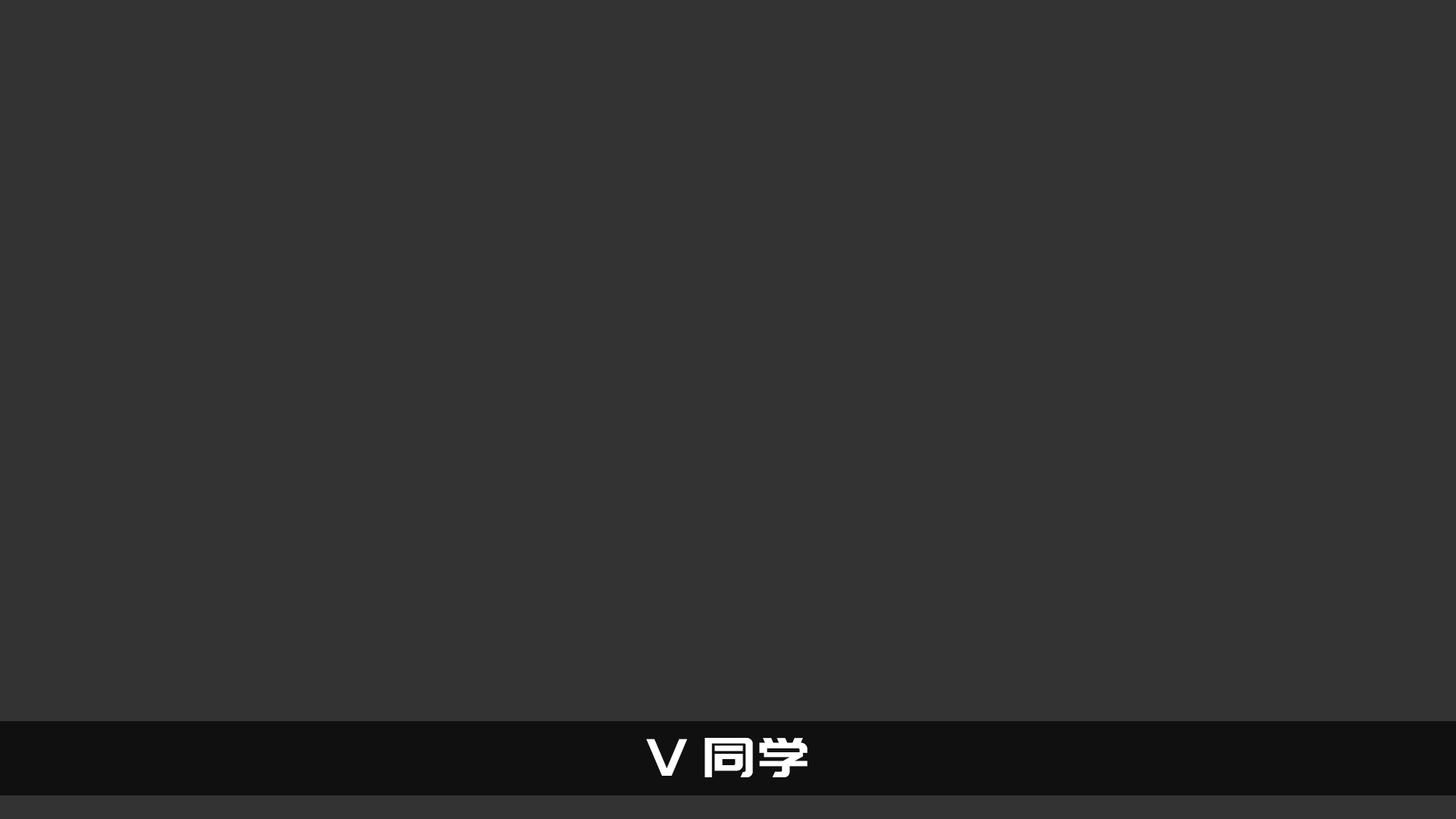
<style>
.page{position:relative;width:1456px;height:819px;background:#333333}
.page>*{position:absolute;margin:0}
.t1{font:54.6px "PangMenZhengDao-3";color:#ffffff}
</style>
<div class="page">
<p class="t1" style="left:646px;top:738px;width:162px;height:39px">V同学</p>
</div>
